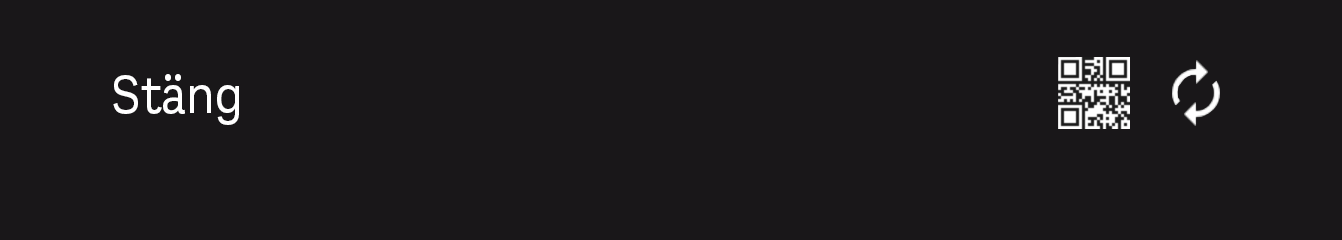
<style>
.page{position:relative;width:1342px;height:240px;background:#191719}
.page>*{position:absolute;margin:0}
.t1{font:54.8px "Aestetico-Regular";color:#ffffff;scale:0.91 1}
</style>
<div class="page">
<p class="t1" style="left:113px;top:74px;width:126px;height:51px">Stäng</p>
</div>
